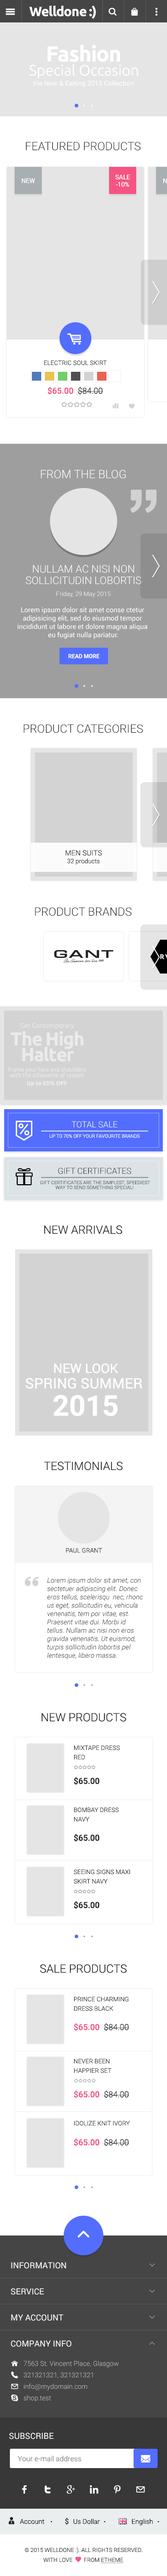
<style>
.page{position:relative;width:167px;height:2576px;background:#ffffff}
.page>*{position:absolute;margin:0}
.t1{font:13.6px "Ubuntu-Bold";letter-spacing:-0.04em;color:#ffffff}
.t2{font:21.8px "Ubuntu-Bold";letter-spacing:-0.04em;color:#ffffff}
.t3{font:14.9px "Ubuntu-Light";color:#ffffff}
.t4{font:6.7px "Roboto-Regular";color:#ffffff}
.t5{font:11.5px "Roboto-Light";color:#212121;text-transform:uppercase}
.t6{font:6.3px "Roboto-Regular";color:#ffffff;text-transform:uppercase}
.t7{font:6.3px/7.3px "Roboto-Regular";color:#ffffff;text-transform:uppercase}
.t8{font:6.3px "Roboto-Light";color:#2b2b2b;text-transform:uppercase}
.t9{font:8.3px "Roboto-Medium";color:#f55582}
.t10{font:8.3px "Roboto-Light";color:#212121}
.t11{font:11.5px "Roboto-Light";color:#ffffff;text-transform:uppercase}
.t12{font:10.4px/11.5px "Roboto-Light";color:#ffffff;text-transform:uppercase}
.t13{font:6.3px "Roboto-Light";color:#ffffff}
.t14{font:6.8px/8.3px "Roboto-Regular";color:#ffffff}
.t15{font:5.7px "Roboto-Medium";color:#ffffff;text-transform:uppercase}
.t16{font:6.3px/7.8px "Roboto-Light";color:#2b2b2b}
.t17{font:7.3px/11.5px "Roboto-Light";color:#2b2b2b;text-transform:uppercase}
.t18{font:6.5px "Ubuntu-Light";color:#ffffff}
.t19{font:18.7px/15.6px "Ubuntu-Bold";letter-spacing:-0.04em;color:#ffffff}
.t20{font:5.7px/5.7px "Ubuntu-Light";color:#ffffff}
.t21{font:5.7px/8px "Ubuntu-Bold";color:#ffffff}
.t22{font:8.3px "Roboto-Light";color:#ffffff;text-transform:uppercase}
.t23{font:4.7px "Roboto-Light";color:#ffffff;text-transform:uppercase}
.t24{font:8.3px "Roboto-Light";color:#212121;text-transform:uppercase}
.t25{font:4.7px/4.9px "Roboto-Light";color:#56595b;text-transform:uppercase}
.t26{font:14.3px/15.5px "Roboto-Regular";color:#ffffff;text-transform:uppercase}
.t27{font:13px/12.9px "Roboto-Regular";color:#ffffff;text-transform:uppercase}
.t28{font:28.7px/27.3px "Roboto-Bold";color:#ffffff;text-transform:uppercase}
.t29{font:6.8px/8.3px "Roboto-LightItalic";color:#000000}
.t30{font:6.3px/9.4px "Roboto-Light";color:#2b2b2b;text-transform:uppercase}
.t31{font:8.3px "Roboto-Medium";color:#212121}
.t32{font:8.3px/26.1px "Roboto-Regular";color:#ffffff;text-transform:uppercase}
.t33{font:6.8px/11.5px "Roboto-Light";color:#bbbbbb}
.t34{font:8.3px "Roboto-Regular";color:#ffffff;text-transform:uppercase}
.t35{font:7.3px "Roboto-Light";color:#848484}
.t36{font:6.8px "Roboto-Light";color:#000000}
.t37{font:7.3px "Roboto-Regular";color:#212121}
.t38{font:5.7px "Roboto-Light";color:#2b2b2b;text-transform:uppercase}
</style>
<div class="page">
<p class="t1" style="left:29px;top:5px;width:67px;height:14px">Welldone :)</p>
<p class="t2" style="left:47px;top:44px;width:73px;height:18px">Fashion</p>
<p class="t3" style="left:29px;top:64px;width:109px;height:15px">Special Occasion</p>
<p class="t4" style="left:33px;top:80px;width:100px;height:7px">the New &amp; Exiting 2015 Collection</p>
<p class="t5" style="left:26px;top:142px;width:115px;height:9px">featured products</p>
<p class="t6" style="left:21px;top:178px;width:14px;height:5px">new</p>
<p class="t7" style="left:115px;top:175px;width:15px;height:12px;text-align:center">sale<br>-10%</p>
<p class="t8" style="left:44px;top:360px;width:63px;height:6px">Electric Soul Skirt</p>
<p class="t9" style="left:47px;top:386px;width:56px;height:9px">$65.00  <span class="t10">$84.00</span></p>
<p class="t11" style="left:41px;top:470px;width:85px;height:9px">FROM THE BLOG</p>
<p class="t12" style="left:26px;top:565px;width:115px;height:20px;text-align:center">Nullam ac nisi non<br>sollicitudin lobortis</p>
<p class="t13" style="left:56px;top:591px;width:55px;height:7px">Friday, 29 May 2015</p>
<p class="t14" style="left:18px;top:607px;width:130px;height:32px;text-align:center">Lorem ipsum dolor sit amet conse ctetur<br>adipisicing elit, sed do eiusmod tempor <br>incididunt ut labore et dolore magna aliqua<br> eu fugiat nulla pariatur.</p>
<p class="t15" style="left:68px;top:654px;width:32px;height:5px">READ MORE</p>
<p class="t5" style="left:23px;top:724px;width:120px;height:9px">product CATEGORIES</p>
<p class="t16" style="left:65px;top:850px;width:37px;height:15px;text-align:center"><span class="t17">men SUITS<br></span>32 products</p>
<p class="t5" style="left:35px;top:907px;width:96px;height:9px">PRODUCT BRANDS</p>
<p class="t18" style="left:20px;top:1023px;width:54px;height:6px">Get Contemporary</p>
<p class="t19" style="left:10px;top:1031px;width:73px;height:31px;text-align:center">The High<br>Halter</p>
<p class="t20" style="left:8px;top:1067px;width:78px;height:20px;text-align:center">Frame your face and shoulders<br>with the silhouette of season<br><span class="t21">Up to 65% OFF</span></p>
<p class="t22" style="left:71px;top:1121px;width:46px;height:7px">TOTAL SALE</p>
<p class="t23" style="left:50px;top:1134px;width:90px;height:4px">UP TO 70% OFF YOUR FAVOURITE BRANDS</p>
<p class="t24" style="left:58px;top:1168px;width:73px;height:6px">Gift CERTIFICATES</p>
<p class="t25" style="left:40px;top:1181px;width:110px;height:8px;text-align:center">Gift certificates are the simplest, speediest<br>way to send something special!</p>
<p class="t5" style="left:44px;top:1225px;width:78px;height:9px">New Arrivals</p>
<p class="t26" style="left:26px;top:1363px;width:116px;height:53px;text-align:center"><span class="t27">NEW LOOK<br></span>SPRING Summer <br><span class="t28">2015</span></p>
<p class="t5" style="left:44px;top:1462px;width:79px;height:9px">Testimonials</p>
<p class="t8" style="left:66px;top:1548px;width:36px;height:5px">Paul Grant</p>
<p class="t29" style="left:47px;top:1577px;width:96px;height:82px">Lorem ipsum dolor sit amet, con sectetuer adipiscing elit. Donec eros tellus, scelerisqu  nec, rhonc us eget, sollicitudin eu, vehicula venenatis, tem por vitae, est. Praesent vitae dui. Morbi id tellus. Nullam ac nisi non eros gravida venenatis. Ut euismod, turpis sollicitudin lobortis pel lentesque, libero massa.<br> dapibus dui, eu dictum justo urna et mi. Integer dictum est vitae sem.</p>
<p class="t5" style="left:41px;top:1713px;width:85px;height:9px">New Products</p>
<p class="t30" style="left:74px;top:1745px;width:46px;height:14px">Mixtape Dress<br>Red</p>
<p class="t31" style="left:74px;top:1777px;width:26px;height:8px">$65.00</p>
<p class="t30" style="left:74px;top:1807px;width:45px;height:14px">Bombay Dress<br>Navy</p>
<p class="t31" style="left:74px;top:1833px;width:26px;height:9px">$65.00</p>
<p class="t30" style="left:74px;top:1869px;width:56px;height:15px">Seeing Signs Maxi <br>Skirt Navy</p>
<p class="t31" style="left:74px;top:1901px;width:26px;height:8px">$65.00</p>
<p class="t5" style="left:40px;top:1964px;width:87px;height:9px">Sale Products</p>
<p class="t30" style="left:74px;top:1997px;width:55px;height:14px">Prince Charming<br>Dress Black</p>
<p class="t9" style="left:74px;top:2023px;width:55px;height:8px">$65.00  <span class="t10">$84.00</span></p>
<p class="t30" style="left:74px;top:2059px;width:38px;height:14px">Never Been <br>Happier Set</p>
<p class="t9" style="left:74px;top:2090px;width:55px;height:8px">$65.00  <span class="t10">$84.00</span></p>
<p class="t8" style="left:74px;top:2121px;width:56px;height:5px">Idolize Knit Ivory</p>
<p class="t9" style="left:74px;top:2138px;width:55px;height:8px">$65.00  <span class="t10">$84.00</span></p>
<p class="t32" style="left:11px;top:2262px;width:60px;height:85px">Information<br>service<br>My account<br>Company Info</p>
<p class="t33" style="left:23px;top:2361px;width:95px;height:41px">7563 St. Vincent Place, Glasgow<br>321321321, 321321321<br>info@mydomain.com<br>shop.test</p>
<p class="t34" style="left:9px;top:2433px;width:45px;height:6px">Subscribe</p>
<p class="t35" style="left:18px;top:2456px;width:63px;height:6px">Your e-mail address</p>
<p class="t36" style="left:20px;top:2519px;width:24px;height:5px">Account</p>
<p class="t37" style="left:65px;top:2518px;width:4px;height:7px">$</p>
<p class="t36" style="left:74px;top:2519px;width:26px;height:5px">Us Dollar</p>
<p class="t36" style="left:132px;top:2519px;width:21px;height:6px">English</p>
<p class="t38" style="left:25px;top:2547px;width:117px;height:7px">© 2015 Welldone :). All Rights Reserved.</p>
</div>
